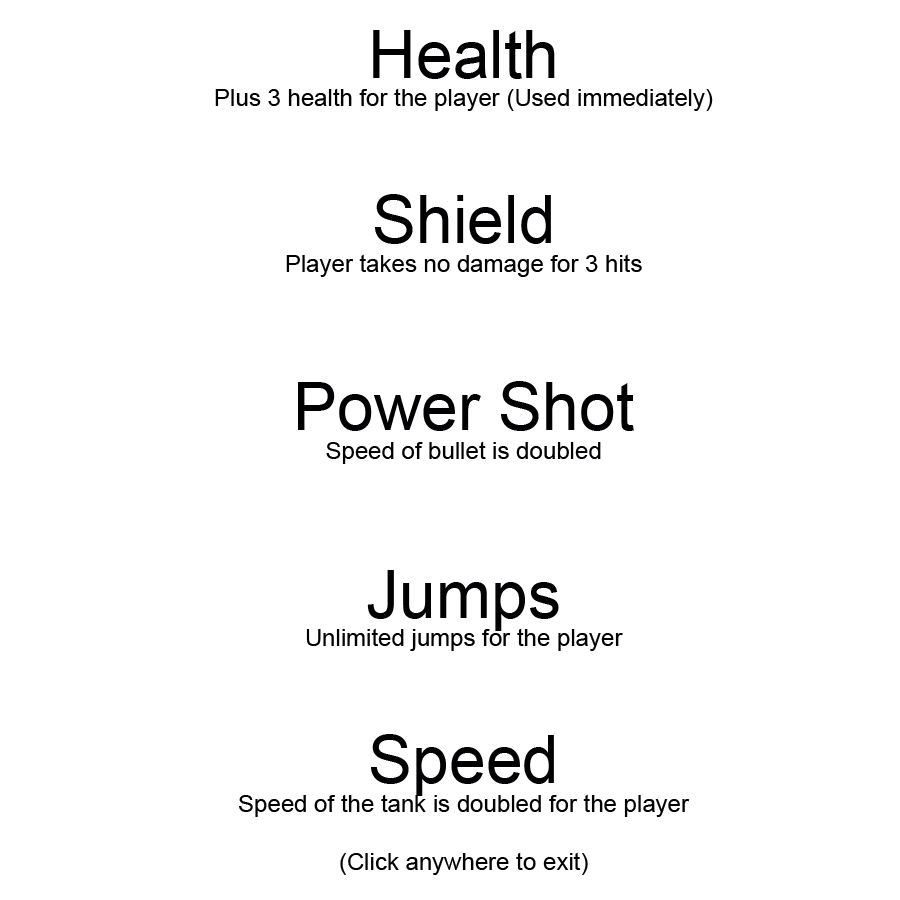
<style>
.page{position:relative;width:900px;height:900px;background:#ffffff}
.page>*{position:absolute;margin:0}
.t1{font:24px "ArialMT";color:#010002}
.t2{font:66px "ArialMT";color:#010002}
</style>
<div class="page">
<p class="t1" style="left:215px;top:30px;width:498px;height:845px;text-align:center"><span class="t2">Health<br></span>Plus 3 health for the player (Used immediately)<br><br><br><span class="t2">Shield<br></span>Player takes no damage for 3 hits<br><span class="t2"><br>Power Shot<br></span>Speed of bullet is doubled<br><span class="t2"><br>Jumps<br></span>Unlimited jumps for the player<br><br><br><span class="t2">Speed<br></span>Speed of the tank is doubled for the player<br><br>(Click anywhere to exit)</p>
</div>
